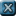
<style>
.page{position:relative;width:16px;height:16px}
.page>*{position:absolute;margin:0}
.t1{font:11px "ArialRoundedMTBold";color:#a2b5bb;scale:1.25 1}
</style>
<div class="page">
<p class="t1" style="left:4px;top:3px;width:9px;height:10px">X</p>
</div>
